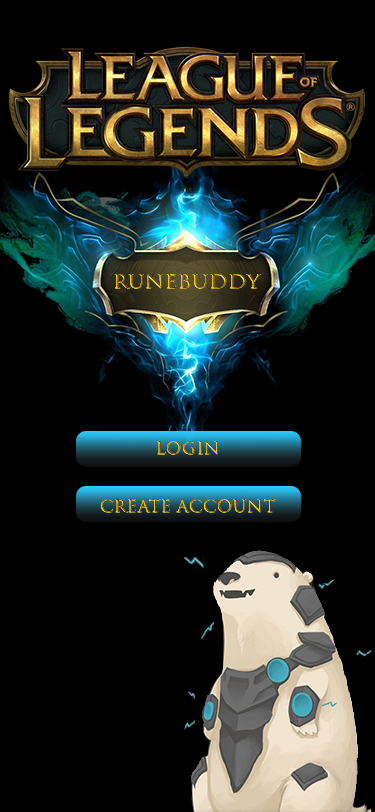
<style>
.page{position:relative;width:375px;height:812px;background:#000000}
.page>*{position:absolute;margin:0}
.t1{font:18.2px "TrajanColor-Concept";font-weight:bold;scale:1.11 1}
.t2{font:16.7px "TrajanColor-Concept";font-weight:bold}
</style>
<div class="page">
<p class="t1" style="left:114px;top:274px;width:147px;height:15px">Runebuddy</p>
<p class="t2" style="left:157px;top:441px;width:62px;height:14px">Login</p>
<p class="t2" style="left:101px;top:499px;width:175px;height:14px">Create Account</p>
</div>
